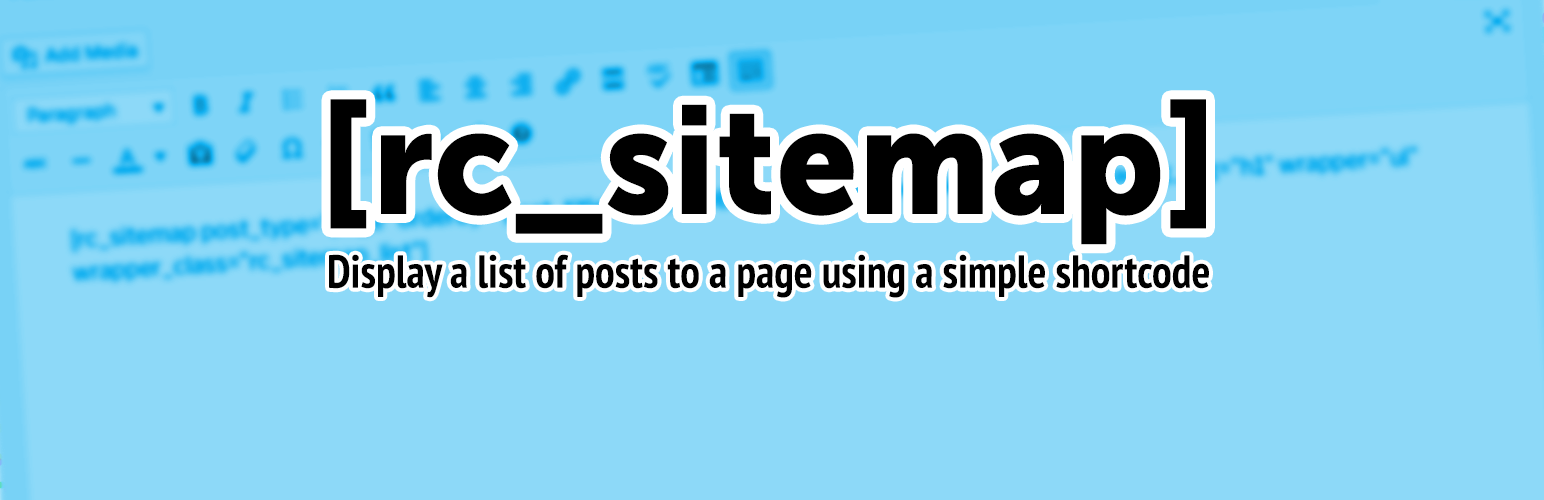
<style>
.page{position:relative;width:1544px;height:500px;background:#8dd9f8}
.page>*{position:absolute;margin:0}
.t1{font:152.6px "MuseoSans-900";color:#000000;scale:0.95 1}
.t2{font:46.5px "PTSans-NarrowBold";color:#000000;scale:0.95 1}
</style>
<div class="page">
<p class="t1" style="left:330px;top:99px;width:876px;height:146px">[rc_sitemap]</p>
<p class="t2" style="left:329px;top:254px;width:880px;height:44px">Display a list of posts to a page using a simple shortcode</p>
</div>
